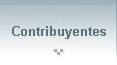
<style>
.page{position:relative;width:117px;height:65px}
.page>*{position:absolute;margin:0}
.t1{font:13px "Arial-BoldMT";color:#5b717c}
</style>
<div class="page">
<p class="t1" style="left:12px;top:26px;width:94px;height:13px">Contribuyentes</p>
</div>
